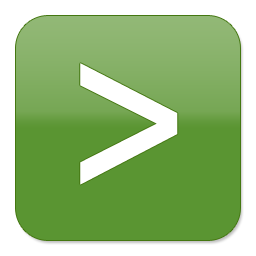
<style>
.page{position:relative;width:256px;height:256px;background:#5a9532}
.page>*{position:absolute;margin:0}
.t1{font:250px "ArialNarrow";letter-spacing:0.01em;color:#ffffff}
</style>
<div class="page">
<p class="t1" style="left:80px;top:63px;width:98px;height:122px">&gt;</p>
</div>
